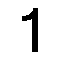
<style>
.page{position:relative;width:64px;height:64px;background:#ffffff}
.page>*{position:absolute;margin:0}
.t1{font:60px "MicrosoftSansSerif";color:#000000}
</style>
<div class="page">
<p class="t1" style="left:22px;top:8px;width:16px;height:44px">1</p>
</div>
